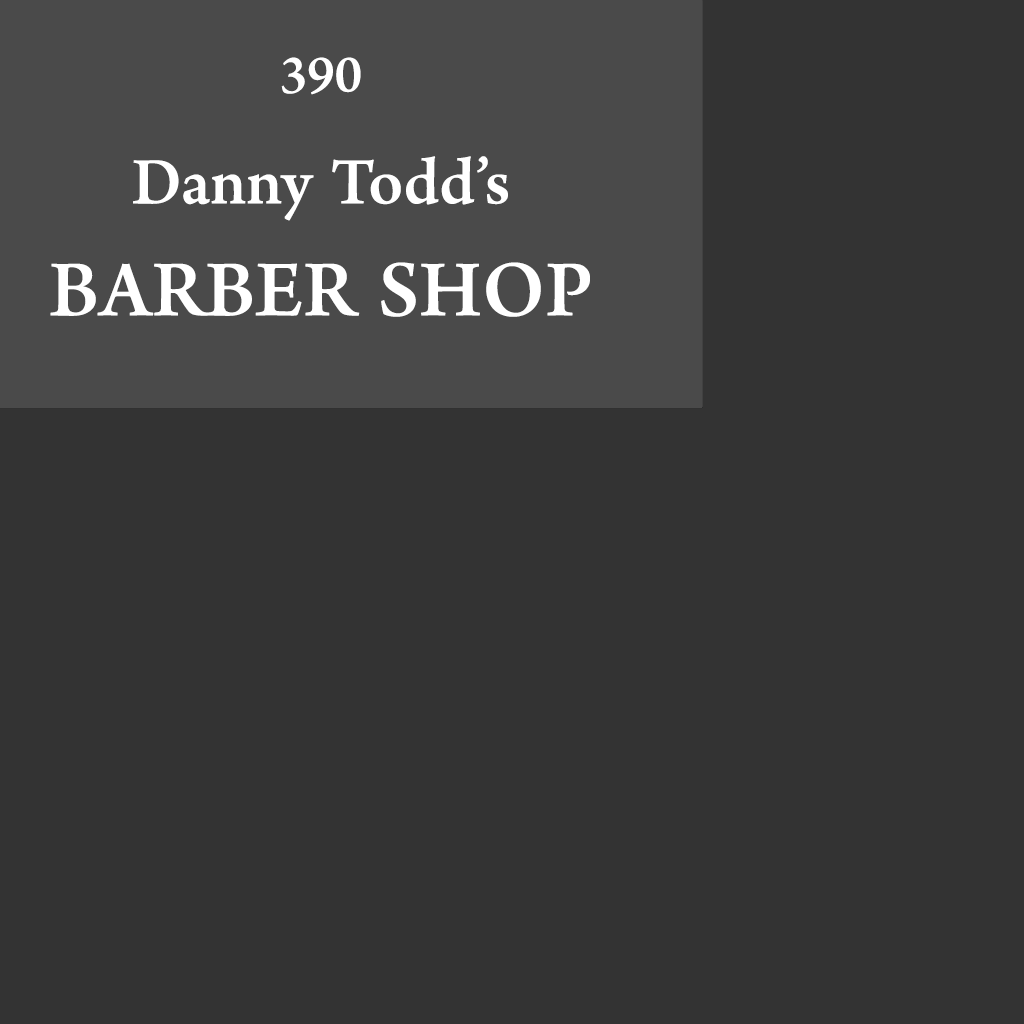
<style>
.page{position:relative;width:1024px;height:1024px;background:#333333}
.page>*{position:absolute;margin:0}
.t1{font:93.3px/111.9px "AdobeNaskh-Medium";color:#ffffff}
.t2{font:74.6px/111.9px "AdobeNaskh-Medium";color:#ffffff}
.t3{font:111.9px/111.9px "AdobeNaskh-Medium";color:#ffffff}
</style>
<div class="page">
<p class="t1" style="left:50px;top:57px;width:540px;height:260px;text-align:center"><span class="t2">390<br></span>Danny Todd’s<br><span class="t3">BARBER SHOP</span></p>
</div>
